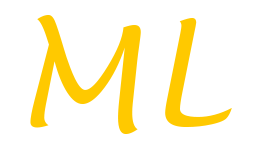
<style>
.page{position:relative;width:263px;height:150px;background:#ffffff}
.page>*{position:absolute;margin:0}
.t1{font:135.4px "LucidaHandwriting-Italic";letter-spacing:0.025em;color:#ffc900}
</style>
<div class="page">
<p class="t1" style="left:30px;top:15px;width:202px;height:119px">ML</p>
</div>
